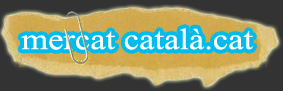
<style>
.page{position:relative;width:283px;height:91px;background:#333333}
.page>*{position:absolute;margin:0}
.t1{font:30px "TimesNewRomanPSMT";color:#fffffe;scale:1.15 1}
</style>
<div class="page">
<p class="t1" style="left:21px;top:28px;width:233px;height:22px">mercat català.cat</p>
</div>
